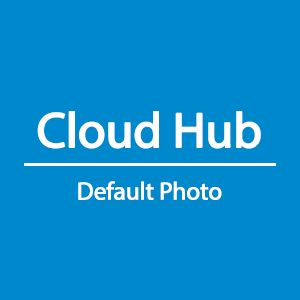
<style>
.page{position:relative;width:300px;height:300px;background:#0088cc}
.page>*{position:absolute;margin:0}
.t1{font:50px "MyriadPro-Regular";letter-spacing:-0.025em;color:#ffffff;font-weight:bold}
.t2{font:25px "MyriadPro-Regular";letter-spacing:-0.025em;color:#ffffff;font-weight:bold}
</style>
<div class="page">
<p class="t1" style="left:37px;top:111px;width:224px;height:38px">Cloud Hub</p>
<p class="t2" style="left:78px;top:181px;width:144px;height:19px">Default Photo</p>
</div>
